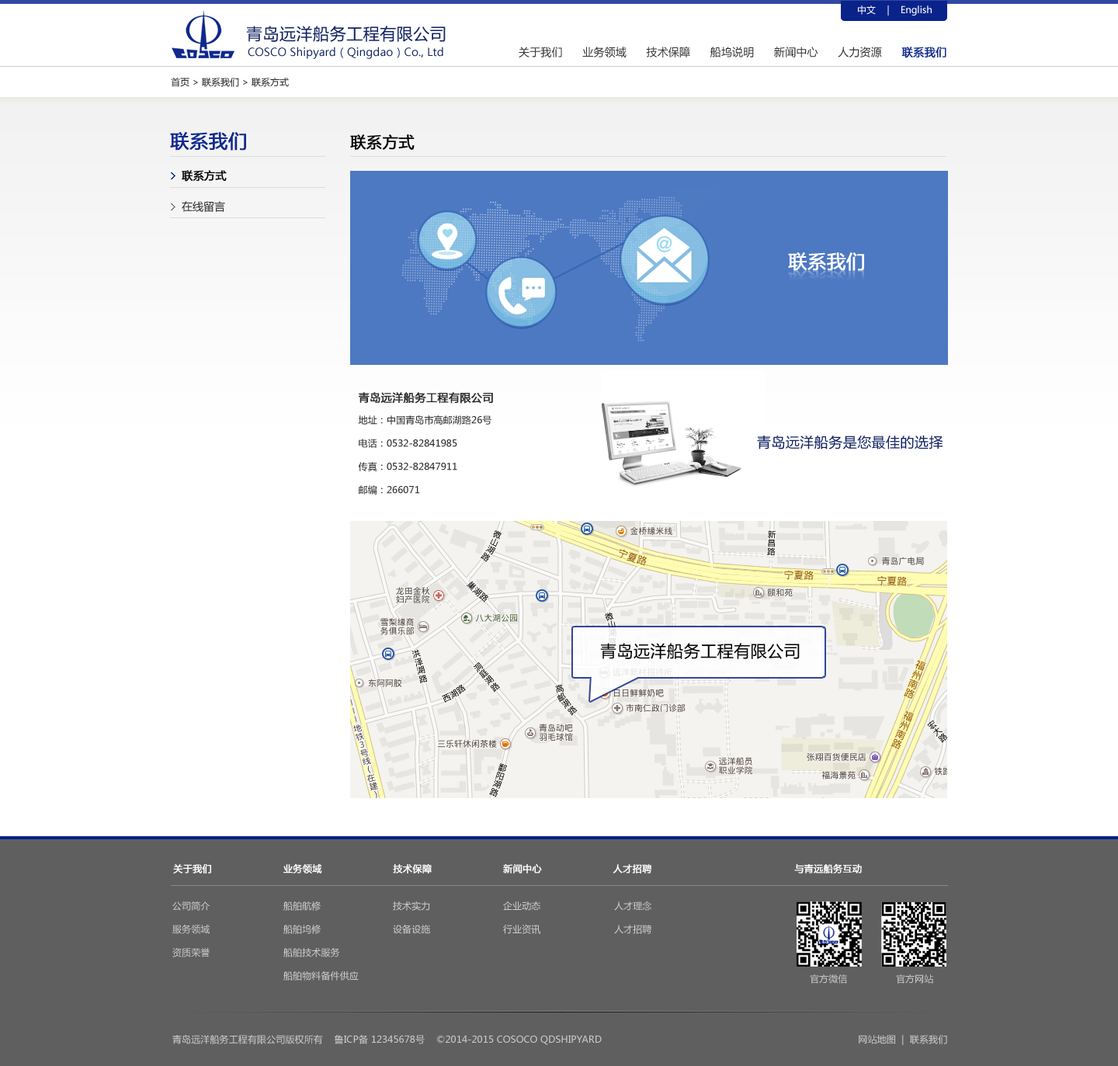
<style>
.page{position:relative;width:1118px;height:1066px;background:#ffffff}
.page>*{position:absolute;margin:0}
.t1{font:9.3px "MicrosoftYaHei";color:#ffffff}
.t2{font:16.3px "MicrosoftYaHei";letter-spacing:0.025em;color:#112262;text-transform:uppercase}
.t3{font:10.9px "MicrosoftYaHei";letter-spacing:0.01em;color:#112262}
.t4{font:10.9px "MicrosoftYaHei";letter-spacing:0.01em;color:#333333;text-transform:uppercase}
.t5{font:10.9px "MicrosoftYaHei";letter-spacing:0.01em;color:#10298e;text-transform:uppercase;font-weight:bold}
.t6{font:9.3px "MicrosoftYaHei";color:#272727}
.t7{font:18.6px "MicrosoftYaHei";letter-spacing:0.01em;color:#10298e;text-transform:uppercase;font-weight:bold}
.t8{font:15.5px "MicrosoftYaHei";letter-spacing:0.01em;color:#000000;text-transform:uppercase;font-weight:bold}
.t9{font:10.9px/31.1px "MicrosoftYaHei";color:#000000;font-weight:bold}
.t10{font:10.9px/31.1px "MicrosoftYaHei";color:#272727}
.t11{font:9.3px/23.3px "MicrosoftYaHei";letter-spacing:0.01em;color:#272727;text-transform:uppercase}
.t12{font:10.9px/23.3px "MicrosoftYaHei";letter-spacing:0.01em;color:#272727;text-transform:uppercase;font-weight:bold}
.t13{font:14px "MicrosoftYaHei";letter-spacing:0.025em;color:#112262;text-transform:uppercase}
.t14{font:16.3px "MicrosoftYaHei";letter-spacing:0.025em;color:#000000;text-transform:uppercase}
.t15{font:9.3px "MicrosoftYaHei";letter-spacing:0.01em;color:#ffffff;text-transform:uppercase;font-weight:bold}
.t16{font:9.3px/23.3px "MicrosoftYaHei";letter-spacing:0.01em;color:#cccccc;text-transform:uppercase}
.t17{font:9.3px "MicrosoftYaHei";letter-spacing:0.01em;color:#cccccc;text-transform:uppercase}
</style>
<div class="page">
<p class="t1" style="left:858px;top:5px;width:74px;height:11px">中文    |    English</p>
<p class="t2" style="left:246px;top:26px;width:200px;height:16px">青岛远洋船务工程有限公司</p>
<p class="t3" style="left:248px;top:47px;width:195px;height:12px">COSCO Shipyard（Qingdao）Co., Ltd</p>
<p class="t4" style="left:519px;top:47px;width:428px;height:11px">关于我们      业务领域      技术保障      船坞说明      新闻中心      人力资源      <span class="t5">联系我们</span></p>
<p class="t6" style="left:171px;top:78px;width:118px;height:9px">首页 &gt; 联系我们 &gt; 联系方式</p>
<p class="t7" style="left:170px;top:132px;width:76px;height:19px">联系我们</p>
<p class="t8" style="left:350px;top:134px;width:65px;height:16px">联系方式</p>
<p class="t9" style="left:182px;top:170px;width:45px;height:42px">联系方式<br><span class="t10">在线留言</span></p>
<p class="t11" style="left:358px;top:392px;width:135px;height:103px"><span class="t12">青岛远洋船务工程有限公司<br></span>地址：中国青岛市高邮湖路26号<br>电话：0532-82841985<br>传真：0532-82847911<br>邮编：266071</p>
<p class="t13" style="left:757px;top:435px;width:187px;height:15px">青岛远洋船务是您最佳的选择</p>
<p class="t14" style="left:600px;top:643px;width:200px;height:16px">青岛远洋船务工程有限公司</p>
<p class="t15" style="left:173px;top:864px;width:689px;height:10px">关于我们                       业务领域                       技术保障                       新闻中心                       人才招聘                                              与青远船务互动</p>
<p class="t16" style="left:172px;top:902px;width:38px;height:56px">公司简介<br>服务领域<br>资质荣誉</p>
<p class="t16" style="left:283px;top:902px;width:76px;height:79px">船舶航修<br>船舶坞修<br>船舶技术服务<br>船舶物料备件供应</p>
<p class="t16" style="left:393px;top:902px;width:37px;height:32px">技术实力<br>设备设施</p>
<p class="t16" style="left:503px;top:902px;width:38px;height:32px">企业动态<br>行业资讯</p>
<p class="t16" style="left:614px;top:902px;width:38px;height:32px">人才理念<br>人才招聘</p>
<p class="t17" style="left:810px;top:975px;width:123px;height:9px">官方微信                 官方网站</p>
<p class="t17" style="left:172px;top:1034px;width:775px;height:11px">青岛远洋船务工程有限公司版权所有    鲁ICP备 12345678号    ©2014-2015 COSOCO QDSHIPYARD                                                                                          网站地图  |  联系我们</p>
</div>
